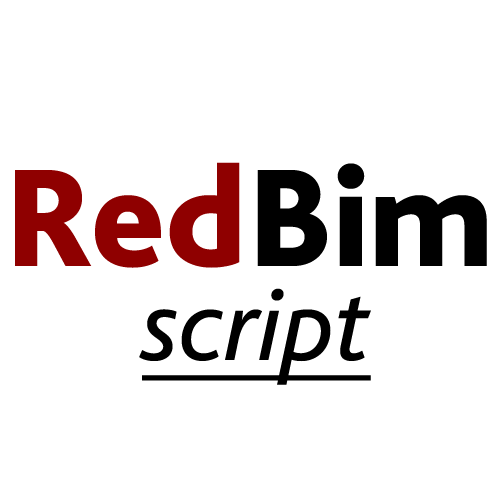
<style>
.page{position:relative;width:500px;height:500px;background:#ffffff}
.page>*{position:absolute;margin:0}
.t1{font:145.8px "BlissPro-Heavy";color:#8f0000}
.t2{font:145.8px "BlissPro-Heavy";color:#000000}
.t3{font:104.2px "BlissPro-Italic";color:#000000;text-decoration:underline}
</style>
<div class="page">
<p class="t1" style="left:15px;top:162px;width:472px;height:106px">Red<span class="t2">Bim</span></p>
<p class="t3" style="left:139px;top:288px;width:232px;height:97px">script</p>
</div>
